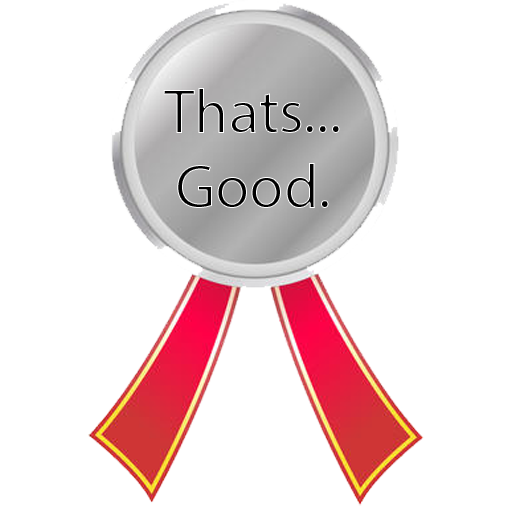
<style>
.page{position:relative;width:512px;height:512px;background:#ffffff}
.page>*{position:absolute;margin:0}
.t1{font:62.3px "MyriadPro-Regular"}
</style>
<div class="page">
<p class="t1" style="left:163px;top:88px;width:177px;height:120px;text-align:center">Thats...<br>Good.</p>
</div>
